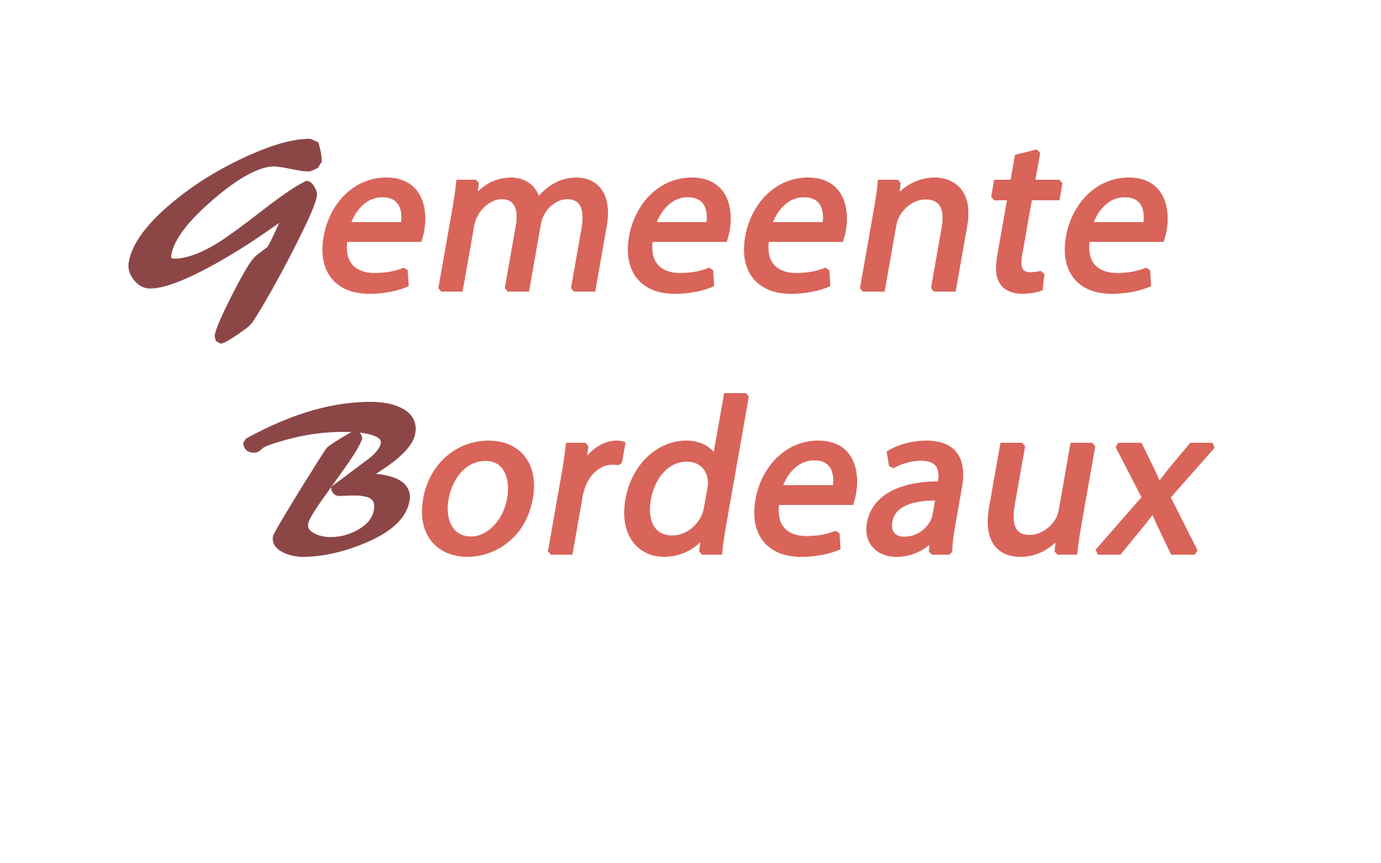
<style>
.page{position:relative;width:1381px;height:863px;background:#ffffff}
.page>*{position:absolute;margin:0}
.t1{font:219.3px "MyriadPro-Regular";color:#d96459;font-weight:bold;font-style:italic}
.t2{font:219.3px "ARBERKLEY";color:#8c4646;font-weight:bold;font-style:italic}
</style>
<div class="page">
<p class="t1" style="left:128px;top:138px;width:1087px;height:420px"><span class="t2">G</span>emeente <br>    <span class="t2">B</span>ordeaux</p>
</div>
